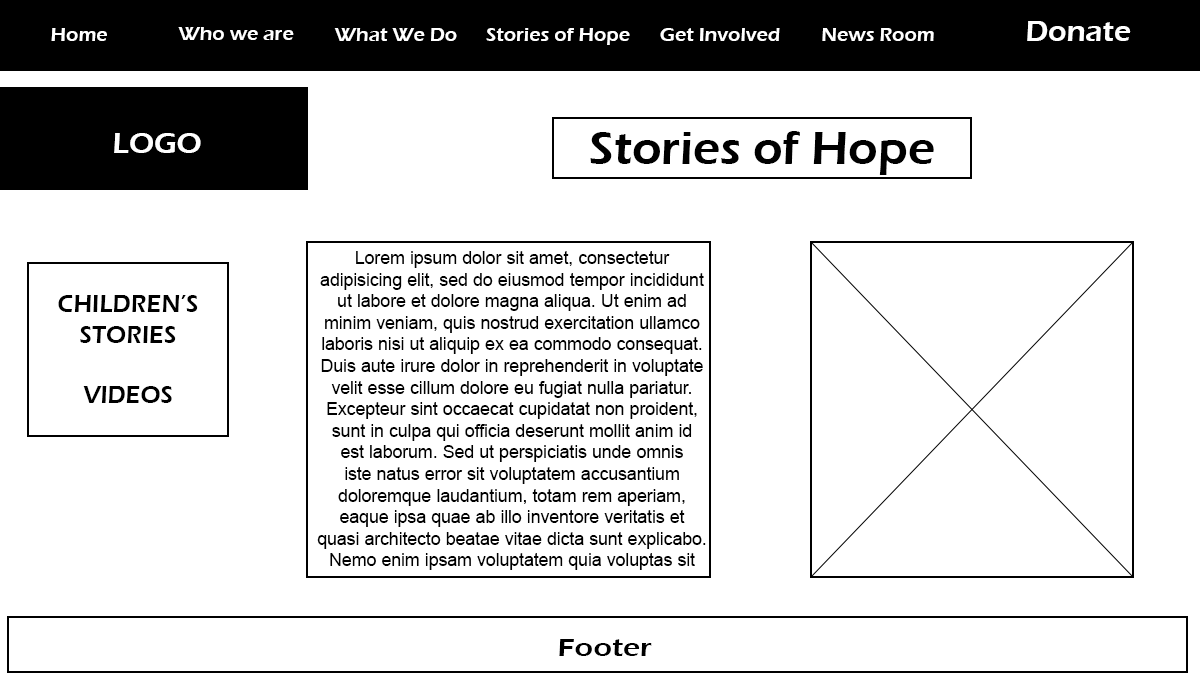
<style>
.page{position:relative;width:1200px;height:700px;background:#ffffff}
.page>*{position:absolute;margin:0}
.t1{font:20px "ErasITC-Demi";color:#ffffff}
.t2{font:24px "ErasITC-Demi";color:#ffffff}
.t3{font:30px "ErasITC-Demi";color:#ffffff}
.t4{font:48px "ErasITC-Demi";color:#000000}
.t5{font:18px "ArialMT";color:#000000}
.t6{font:24px "ArialMT";color:#000000}
.t7{font:25.3px "ErasITC-Demi";color:#000000;scale:0.95 1}
.t8{font:26.1px "ErasITC-Demi";color:#000000;scale:1.15 1}
</style>
<div class="page">
<p class="t1" style="left:51px;top:28px;width:56px;height:13px">Home</p>
<p class="t1" style="left:178px;top:27px;width:116px;height:13px"><span class="t2"><br></span>Who we are</p>
<p class="t1" style="left:334px;top:28px;width:123px;height:13px">What We Do</p>
<p class="t1" style="left:486px;top:28px;width:144px;height:17px">Stories of Hope</p>
<p class="t1" style="left:660px;top:28px;width:120px;height:13px">Get Involved</p>
<p class="t1" style="left:822px;top:28px;width:112px;height:13px">News Room</p>
<p class="t3" style="left:1027px;top:21px;width:104px;height:20px">Donate</p>
<p class="t3" style="left:114px;top:133px;width:87px;height:20px">LOGO</p>
<p class="t4" style="left:590px;top:131px;width:344px;height:44px"><span class="t3"><br></span>Stories of Hope</p>
<p class="t5" style="left:317px;top:251px;width:389px;height:319px;text-align:center">Lorem ipsum dolor sit amet, consectetur adipisicing elit, sed do eiusmod tempor incididunt ut labore et dolore magna aliqua. Ut enim ad minim veniam, quis nostrud exercitation ullamco laboris nisi ut aliquip ex ea commodo consequat. Duis aute irure dolor in reprehenderit in voluptate velit esse cillum dolore eu fugiat nulla pariatur. Excepteur sint occaecat cupidatat non proident, sunt in culpa qui officia deserunt mollit anim id est laborum. Sed ut perspiciatis unde omnis iste natus error sit voluptatem accusantium doloremque laudantium, totam rem aperiam, eaque ipsa quae ab illo inventore veritatis et quasi architecto beatae vitae dicta sunt explicabo. Nemo enim ipsam voluptatem quia voluptas sit aspernatur aut odit aut fugit, sed <span class="t6">quia consequuntur magni dolores eos qui ratione voluptatem sequi nesciunt. Neque porro quisquam est, qui dolorem ipsum quia dolor sit amet, consectetur, adipisci velit, sed quia non numquam eius modi tempora incidunt ut labore et dolore magnam aliquam quaerat voluptatem.</span></p>
<p class="t7" style="left:58px;top:295px;width:140px;height:108px;text-align:center">CHILDREN’S STORIES<br><br>VIDEOS</p>
<p class="t8" style="left:559px;top:639px;width:93px;height:17px">Footer</p>
</div>
